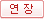
<style>
.page{position:relative;width:44px;height:19px}
.page>*{position:absolute;margin:0}
.t1{font:12px "morris9";color:#ba1c1c}
</style>
<div class="page">
<p class="t1" style="left:10px;top:4px;width:23px;height:10px">연 장</p>
</div>
